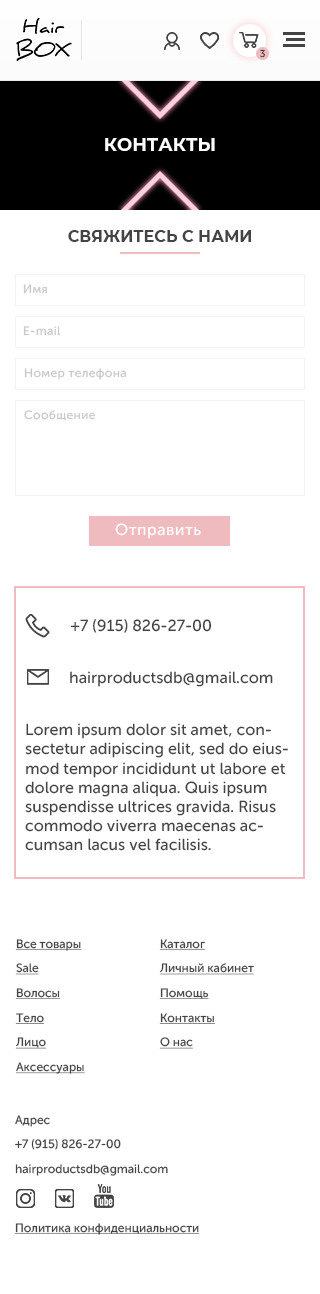
<style>
.page{position:relative;width:320px;height:1294px;background:#ffffff}
.page>*{position:absolute;margin:0}
.t1{font:9.8px "MuseoSansCyrl-500";letter-spacing:0.03em;color:#444444}
.t2{font:18px "Montserrat-Bold";color:#ffffff;text-transform:uppercase}
.t3{font:16px "Montserrat-Bold";color:#444444;text-transform:uppercase}
.t4{font:12px "MuseoSansCyrl-500";letter-spacing:0.03em;color:#c9c9c9}
.t5{font:16px "MuseoSansCyrl-500";letter-spacing:0.03em;color:#ffffff}
.t6{font:16px "MuseoSansCyrl-500";color:#444444}
.t7{font:12px/24.7px "MuseoSansCyrl-500";color:#444444;text-decoration:underline}
.t8{font:12px/24.7px "MuseoSansCyrl-500";color:#444444}
.t9{font:12px "MuseoSansCyrl-500";color:#444444;text-decoration:underline}
</style>
<div class="page">
<p class="t1" style="left:260px;top:49px;width:5px;height:9px">3</p>
<p class="t2" style="left:105px;top:138px;width:110px;height:13px">контакты</p>
<p class="t3" style="left:68px;top:230px;width:183px;height:12px">свяжитесь с нами</p>
<p class="t4" style="left:23px;top:284px;width:24px;height:10px">Имя</p>
<p class="t4" style="left:23px;top:326px;width:38px;height:10px">E-mail</p>
<p class="t4" style="left:24px;top:368px;width:102px;height:12px">Номер телефона</p>
<p class="t4" style="left:24px;top:410px;width:72px;height:11px">Сообщение</p>
<p class="t5" style="left:115px;top:523px;width:86px;height:16px">Отправить</p>
<p class="t6" style="left:70px;top:619px;width:142px;height:14px">+7 (915) 826-27-00</p>
<p class="t6" style="left:70px;top:671px;width:203px;height:16px">hairproductsdb@gmail.com</p>
<p class="t6" style="left:25px;top:723px;width:263px;height:128px">Lorem ipsum dolor sit amet, consectetur adipiscing elit, sed do eiusmod tempor incididunt ut labore et dolore magna aliqua. Quis ipsum suspendisse ultrices gravida. Risus commodo viverra maecenas accumsan lacus vel facilisis.</p>
<p class="t7" style="left:15px;top:939px;width:70px;height:135px">Все товары<br>Sale<br>Волосы<br>Тело<br>Лицо<br>Аксессуары</p>
<p class="t7" style="left:159px;top:939px;width:95px;height:110px">Каталог<br>Личный кабинет<br>Помощь<br>Контакты<br>О нас</p>
<p class="t8" style="left:15px;top:1115px;width:153px;height:61px">Адрес<br>+7 (915) 826-27-00<br>hairproductsdb@gmail.com</p>
<p class="t9" style="left:14px;top:1223px;width:186px;height:12px">Политика конфиденциальности</p>
</div>
